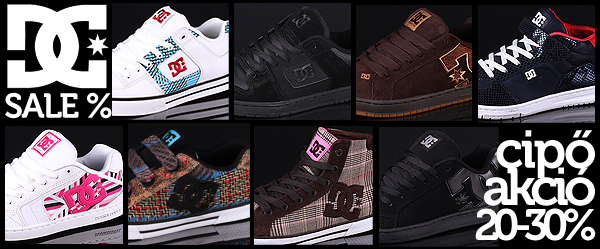
<style>
.page{position:relative;width:600px;height:249px}
.page>*{position:absolute;margin:0}
.t1{font:34.6px "Museo-700";letter-spacing:-0.05em;color:#ffffff}
.t2{font:52.8px "Museo-700";letter-spacing:-0.05em;color:#ffffff}
.t3{font:52.8px "Museo-700";letter-spacing:-0.1em;color:#ffffff}
.t4{font:43.8px "Museo-700";letter-spacing:-0.15em;color:#ffffff}
</style>
<div class="page">
<p class="t1" style="left:5px;top:92px;width:107px;height:27px">SALE %</p>
<p class="t2" style="left:496px;top:130px;width:99px;height:49px">cipő</p>
<p class="t3" style="left:484px;top:167px;width:111px;height:39px">akció</p>
<p class="t4" style="left:475px;top:208px;width:121px;height:33px">20-30%</p>
</div>
